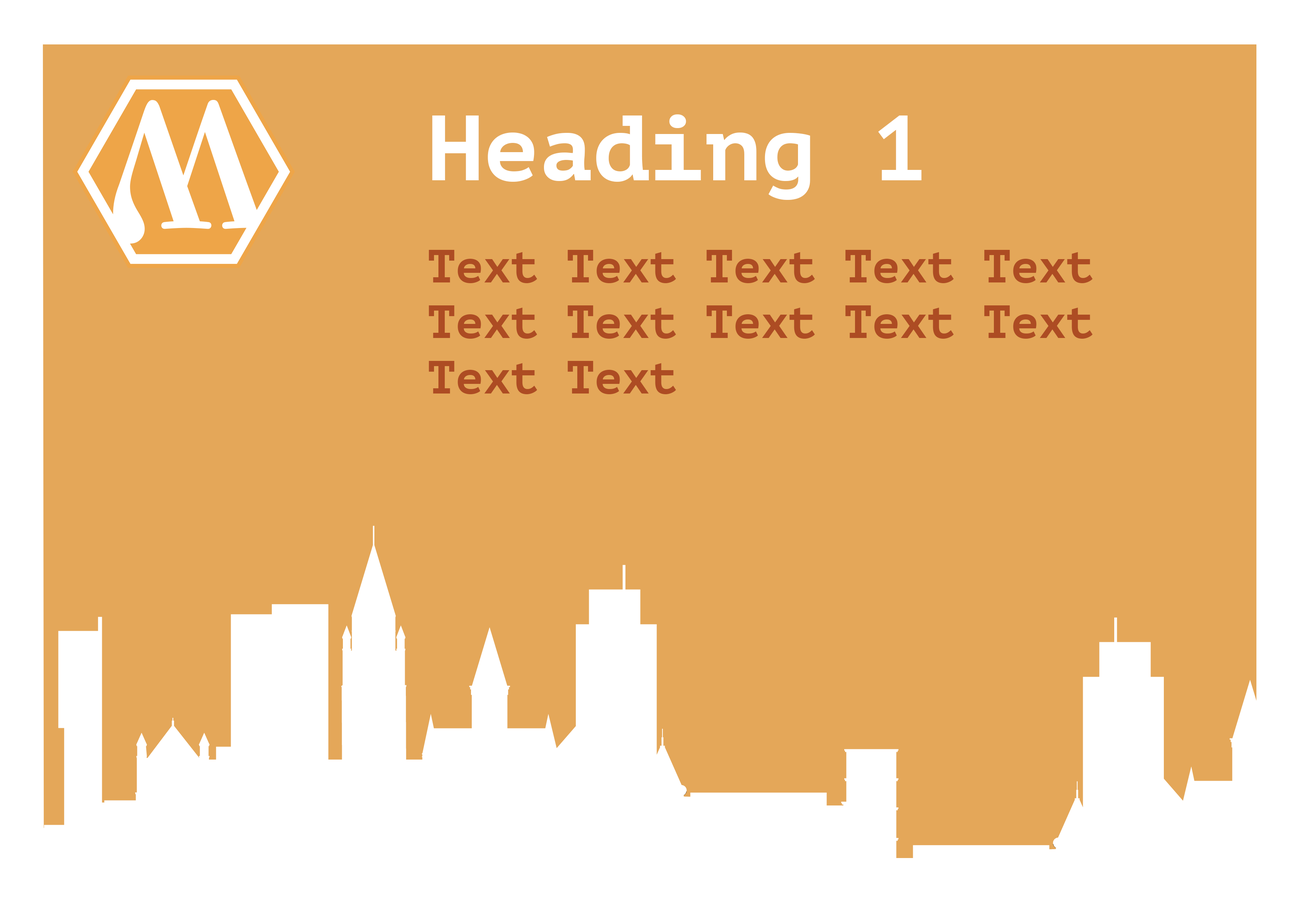
<style>
.page{position:relative;width:1299px;height:918px;background:#e4a759}
.page>*{position:absolute;margin:0}
.t1{font:92.6px "PTMono-Bold";color:#ffffff}
.t2{font:46.3px "PTMono-Bold";color:#ad4c23}
</style>
<div class="page">
<p class="t1" style="left:432px;top:114px;width:489px;height:86px">Heading 1</p>
<p class="t2" style="left:429px;top:250px;width:664px;height:144px">Text Text Text Text Text Text Text Text Text Text Text Text</p>
</div>
